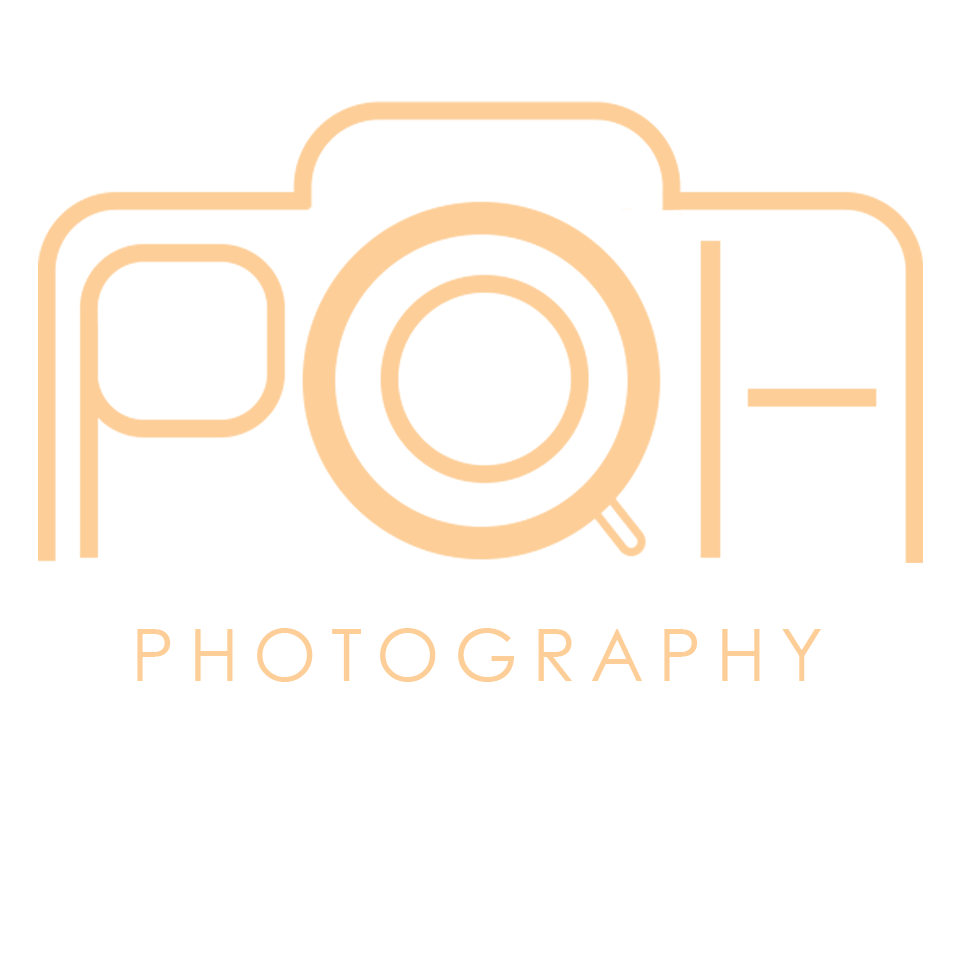
<style>
.page{position:relative;width:960px;height:960px;background:#ffffff}
.page>*{position:absolute;margin:0}
.t1{font:72.6px "CenturyGothic";letter-spacing:0.2em;color:#fdce98}
</style>
<div class="page">
<p class="t1" style="left:137px;top:628px;width:684px;height:54px">PHOTOGRAPHY</p>
</div>
